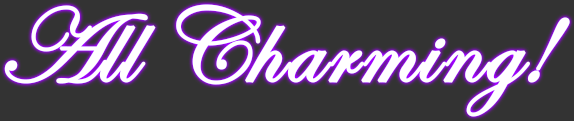
<style>
.page{position:relative;width:574px;height:121px;background:#333333}
.page>*{position:absolute;margin:0}
.t1{font:107px "EdwardianScriptITC";color:#ffffff;font-weight:bold}
</style>
<div class="page">
<p class="t1" style="left:4px;top:4px;width:566px;height:113px">All Charming!</p>
</div>
